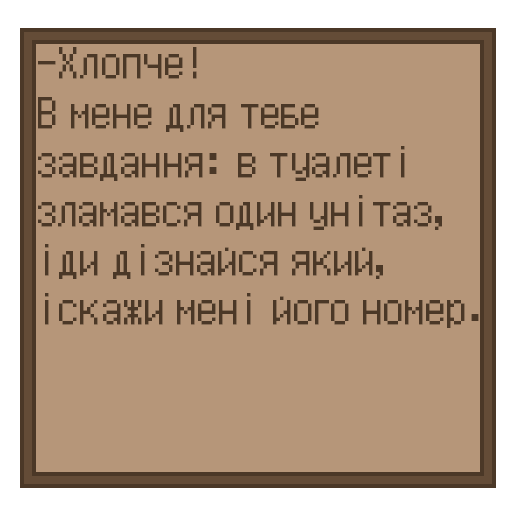
<style>
.page{position:relative;width:512px;height:512px;background:#b69679}
.page>*{position:absolute;margin:0}
.t1{font:41px "XENOA";color:#4b3827}
</style>
<div class="page">
<p class="t1" style="left:38px;top:47px;width:441px;height:281px">-Хлопче!<br>В мене для тебе завдання: в туалеті<br>зламався один унітаз, іди дізнайся який, іскажи мені його номер.</p>
</div>
